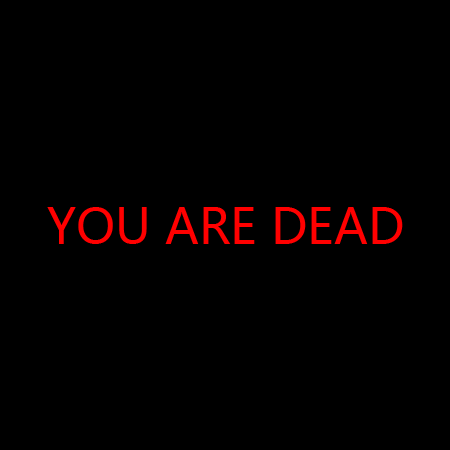
<style>
.page{position:relative;width:450px;height:450px;background:#000000}
.page>*{position:absolute;margin:0}
.t1{font:48px "MicrosoftYaHei";color:#ff0000}
</style>
<div class="page">
<p class="t1" style="left:47px;top:207px;width:356px;height:37px">YOU ARE DEAD</p>
</div>
